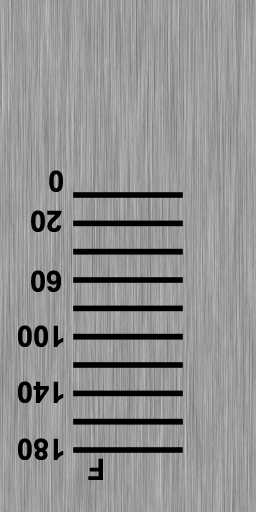
<style>
.page{position:relative;width:256px;height:512px}
.page>*{position:absolute;margin:0}
.t1{font:29.2px "Arial-BoldMT";color:#000000}
</style>
<div class="page">
<p class="t1" style="left:49px;top:170px;width:14px;height:22px;rotate:180deg">0</p>
<p class="t1" style="left:31px;top:210px;width:31px;height:22px;rotate:180deg">20</p>
<p class="t1" style="left:31px;top:270px;width:30px;height:22px;rotate:180deg">60</p>
<p class="t1" style="left:18px;top:325px;width:46px;height:22px;rotate:180deg">100</p>
<p class="t1" style="left:18px;top:381px;width:46px;height:22px;rotate:180deg">140</p>
<p class="t1" style="left:18px;top:438px;width:46px;height:22px;rotate:180deg">180</p>
<p class="t1" style="left:88px;top:458px;width:15px;height:22px;rotate:180deg">F</p>
</div>
